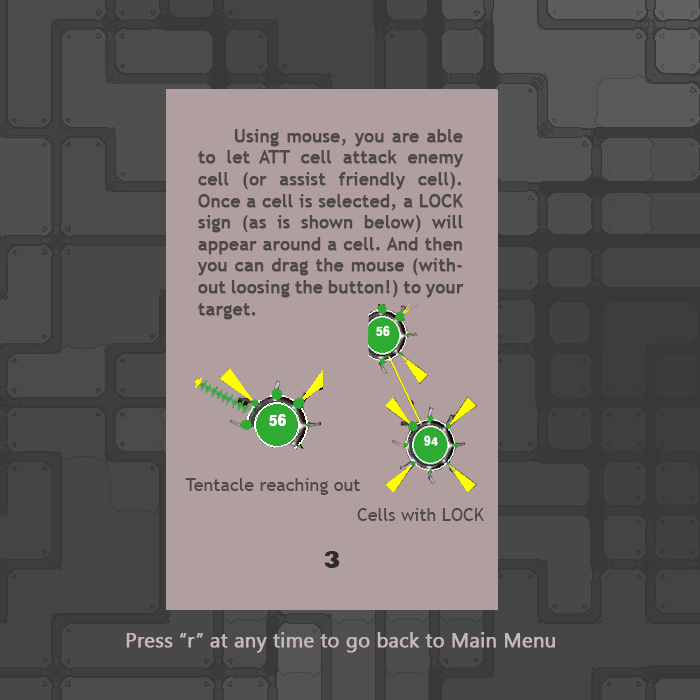
<style>
.page{position:relative;width:700px;height:700px;background:#b19f9f}
.page>*{position:absolute;margin:0}
.t1{font:18px "TrebuchetMS";color:#4d4949;font-weight:bold}
.t2{font:35px "TrajanPro-Regular";color:#4d4949;font-weight:bold;font-style:italic}
.t3{font:18px "TrebuchetMS";color:#4d4949}
.t4{font:25px "Rockwell-ExtraBold";color:#2e2b2b}
.t5{font:20px "SegoeUISymbol";color:#c9b8b8;font-weight:bold}
</style>
<div class="page">
<p class="t1" style="left:197px;top:129px;width:267px;height:191px;text-align:justify"><span class="t2"> </span>Using mouse, you are able to let ATT cell attack enemy cell (or assist friendly cell). Once a cell is selected, a LOCK sign (as is shown below) will appear around a cell. And then you can drag the mouse (without loosing the button!) to your target.</p>
<p class="t3" style="left:185px;top:478px;width:175px;height:17px">Tentacle reaching out</p>
<p class="t3" style="left:357px;top:508px;width:127px;height:13px">Cells with LOCK</p>
<p class="t4" style="left:324px;top:551px;width:16px;height:17px">3</p>
<p class="t5" style="left:126px;top:632px;width:429px;height:21px">Press “r” at any time to go back to Main Menu</p>
</div>
